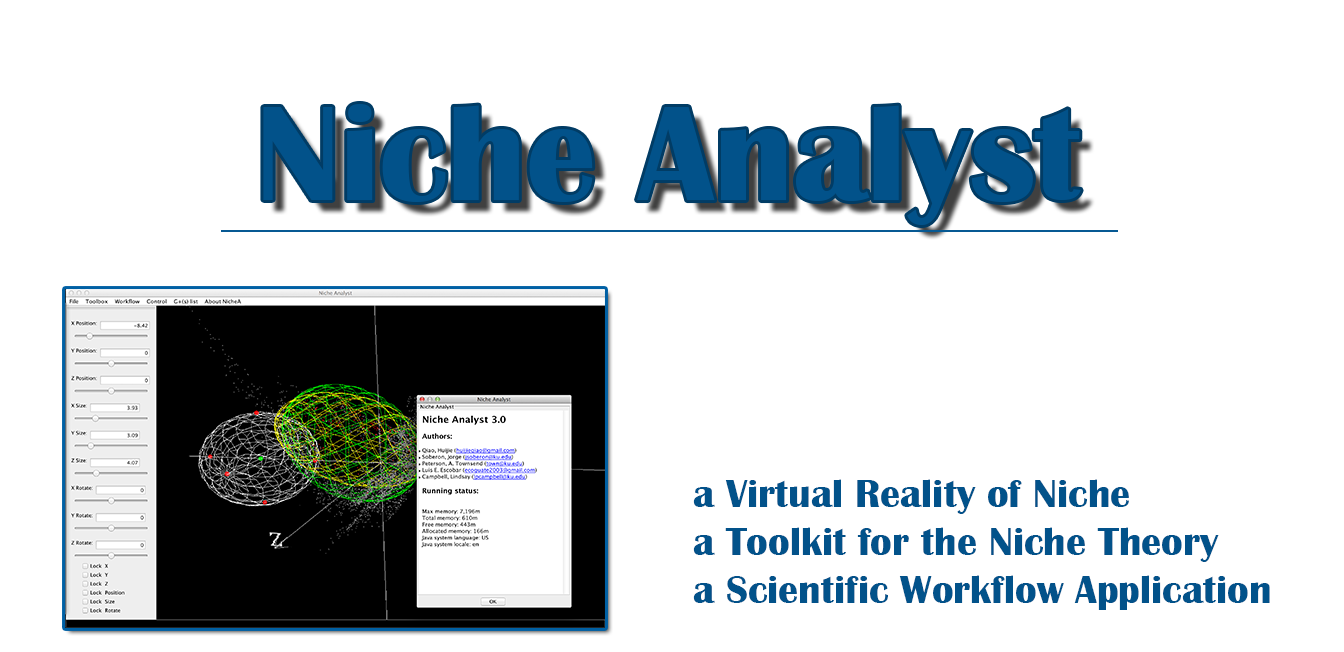
<style>
.page{position:relative;width:1344px;height:652px;background:#ffffff}
.page>*{position:absolute;margin:0}
.t1{font:140px "BritannicBold";color:#02528a}
.t2{font:40px "BritannicBold";color:#02528a}
</style>
<div class="page">
<p class="t1" style="left:263px;top:104px;width:818px;height:121px">Niche Analyst</p>
<p class="t2" style="left:693px;top:479px;width:577px;height:131px">a Virtual Reality of Niche <br>a Toolkit for the Niche Theory<br>a Scientific Workflow Application</p>
</div>
